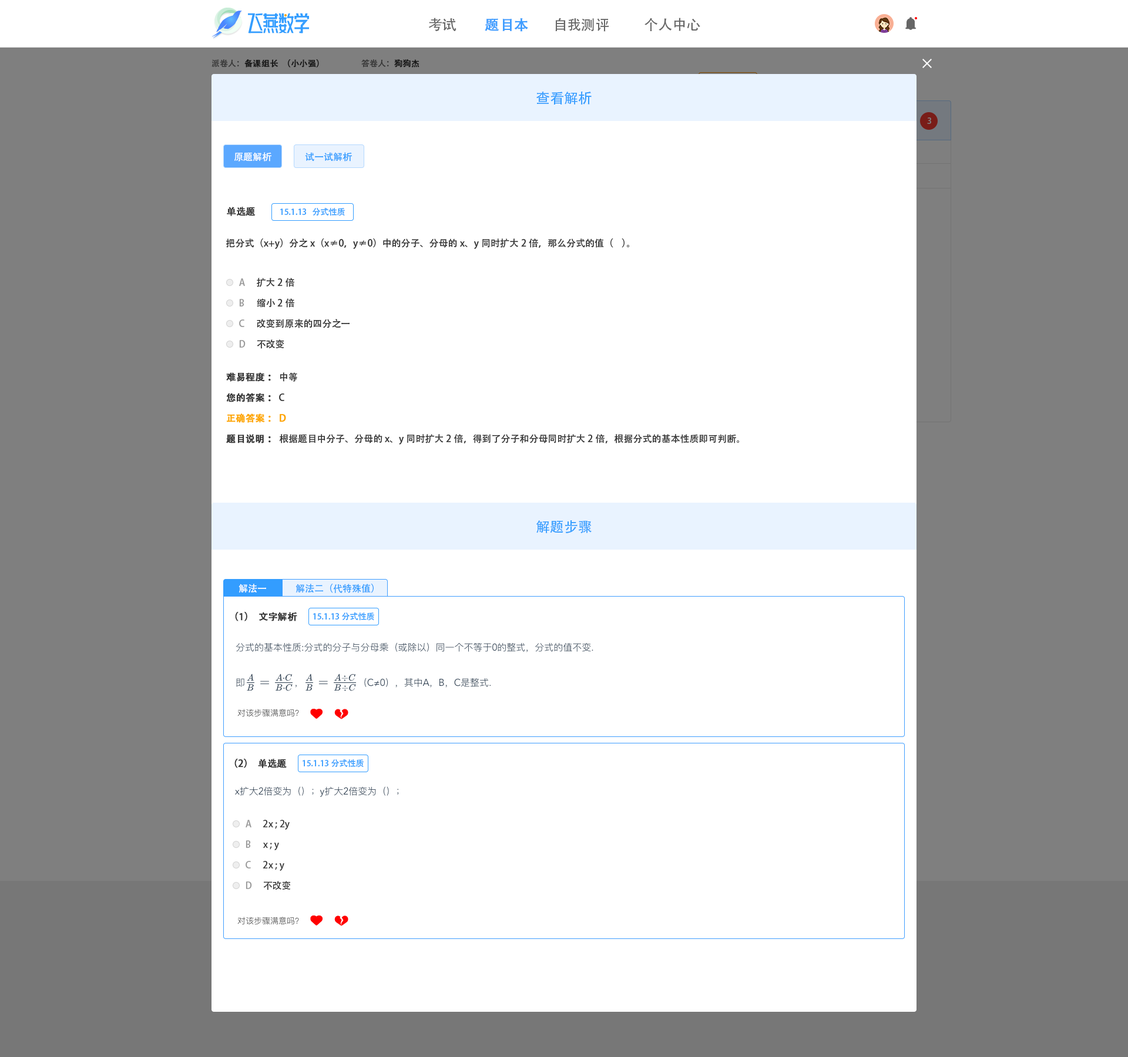
<style>
.page{position:relative;width:1128px;height:1057px;background:#ffffff}
.page>*{position:absolute;margin:0}
.t1{font:14.1px "AdobeHeitiStd-Regular";color:#666666}
.t2{font:14.1px "AdobeHeitiStd-Regular";color:#409eff;font-weight:bold}
.t3{font:8.2px "AdobeHeitiStd-Regular";color:#191919;font-weight:bold}
.t4{font:8.2px "AdobeHeitiStd-Regular";color:#191919}
.t5{font:8.2px "AdobeHeitiStd-Regular"}
.t6{font:8.2px "AdobeHeitiStd-Regular";font-weight:bold}
.t7{font:14.1px "AdobeHeitiStd-Regular";color:#339dff}
.t8{font:8.2px "AdobeHeitiStd-Regular";color:#7f7f7f}
.t9{font:9.4px "AdobeHeitiStd-Regular";color:#ffffff}
.t10{font:9.4px "AdobeHeitiStd-Regular";color:#339dff}
.t11{font:9.4px "AdobeHeitiStd-Regular";color:#333333;font-weight:bold}
.t12{font:8.2px "AdobeHeitiStd-Regular";color:#339dff}
.t13{font:9.4px "AdobeHeitiStd-Regular";color:#333333}
.t14{font:9.4px "AdobeHeitiStd-Regular";color:#999999}
.t15{font:9.4px "AdobeHeitiStd-Regular";color:#fea300;font-weight:bold}
</style>
<div class="page">
<p class="t1" style="left:428px;top:18px;width:28px;height:13px">考试</p>
<p class="t1" style="left:555px;top:18px;width:54px;height:14px">自我测评</p>
<p class="t1" style="left:644px;top:18px;width:56px;height:13px">个人中心</p>
<p class="t2" style="left:485px;top:18px;width:43px;height:14px">题目本</p>
<p class="t3" style="left:211px;top:59px;width:108px;height:9px"><span class="t4">派卷人：</span>备课组长（小小强）</p>
<p class="t5" style="left:361px;top:59px;width:58px;height:9px">答卷人：<span class="t6">狗狗杰</span></p>
<p class="t7" style="left:536px;top:92px;width:56px;height:13px">查看解析</p>
<p class="t8" style="left:927px;top:117px;width:4px;height:7px">3</p>
<p class="t9" style="left:234px;top:152px;width:37px;height:10px">原题解析</p>
<p class="t10" style="left:305px;top:152px;width:47px;height:10px">试一试解析</p>
<p class="t11" style="left:227px;top:207px;width:29px;height:9px">单选题</p>
<p class="t12" style="left:280px;top:208px;width:65px;height:8px">15.1.13   分式性质</p>
<p class="t13" style="left:226px;top:238px;width:403px;height:11px">把分式（x+y）分之x（x≠0，y≠0）中的分子、分母的x、y同时扩大2倍，那么分式的值（    ）。</p>
<p class="t14" style="left:239px;top:278px;width:6px;height:8px">A</p>
<p class="t13" style="left:257px;top:278px;width:37px;height:9px">扩大2倍</p>
<p class="t14" style="left:239px;top:299px;width:5px;height:8px">B</p>
<p class="t13" style="left:257px;top:298px;width:37px;height:10px">缩小2倍</p>
<p class="t14" style="left:239px;top:320px;width:5px;height:7px">C</p>
<p class="t13" style="left:257px;top:319px;width:92px;height:9px">改变到原来的四分之一</p>
<p class="t14" style="left:239px;top:340px;width:7px;height:8px">D</p>
<p class="t13" style="left:257px;top:340px;width:27px;height:9px">不改变</p>
<p class="t11" style="left:226px;top:372px;width:71px;height:10px">难易程度：<span class="t13"> 中等</span></p>
<p class="t11" style="left:226px;top:393px;width:58px;height:9px">您的答案：<span class="t13"> C</span></p>
<p class="t15" style="left:227px;top:414px;width:59px;height:9px">正确答案： D</p>
<p class="t13" style="left:226px;top:434px;width:513px;height:11px"><span class="t11">题目说明： </span>根据题目中分子、分母的x、y同时扩大2倍，得到了分子和分母同时扩大2倍，根据分式的基本性质即可判断。</p>
<p class="t7" style="left:536px;top:520px;width:56px;height:13px">解题步骤</p>
<p class="t9" style="left:238px;top:584px;width:28px;height:9px">解法一</p>
<p class="t10" style="left:295px;top:584px;width:79px;height:9px">解法二（代特殊值）</p>
<p class="t11" style="left:235px;top:612px;width:62px;height:9px">（1）文字解析</p>
<p class="t12" style="left:313px;top:613px;width:61px;height:8px">15.1.13分式性质</p>
<p class="t11" style="left:234px;top:759px;width:53px;height:9px">（2）单选题</p>
<p class="t12" style="left:303px;top:760px;width:61px;height:8px">15.1.13分式性质</p>
<p class="t14" style="left:246px;top:820px;width:5px;height:8px">A</p>
<p class="t13" style="left:263px;top:820px;width:27px;height:10px">2x ; 2y</p>
<p class="t14" style="left:246px;top:841px;width:5px;height:7px">B</p>
<p class="t13" style="left:263px;top:843px;width:16px;height:8px">x ; y</p>
<p class="t14" style="left:246px;top:861px;width:5px;height:8px">C</p>
<p class="t13" style="left:263px;top:861px;width:21px;height:10px">2x ; y</p>
<p class="t14" style="left:246px;top:882px;width:6px;height:7px">D</p>
<p class="t13" style="left:263px;top:881px;width:28px;height:9px">不改变</p>
</div>
